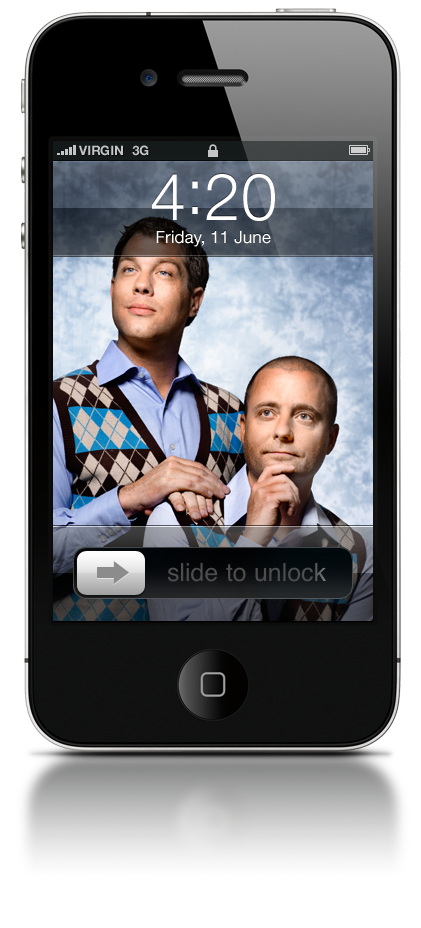
<style>
.page{position:relative;width:421px;height:928px}
.page>*{position:absolute;margin:0}
.t1{font:13px "HelveticaNeue-Bold";color:#c4c5c6;text-transform:uppercase}
.t2{font:65px "HelveticaNeue-Light";color:#ffffff}
.t3{font:17px "HelveticaNeue";color:#ffffff}
</style>
<div class="page">
<p class="t1" style="left:79px;top:145px;width:44px;height:11px">VIRGIN</p>
<p class="t1" style="left:132px;top:145px;width:17px;height:11px">3G</p>
<p class="t2" style="left:152px;top:174px;width:123px;height:47px">4:20</p>
<p class="t3" style="left:156px;top:230px;width:115px;height:17px">Friday, 11 June</p>
</div>
